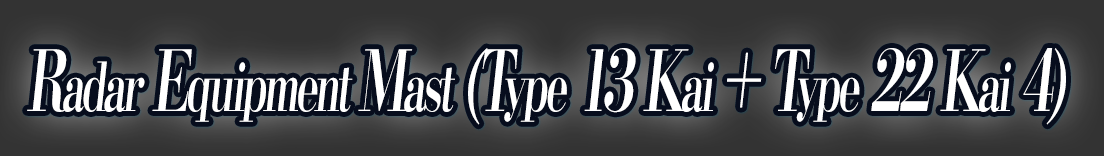
<style>
.page{position:relative;width:1104px;height:156px}
.page>*{position:absolute;margin:0}
.t1{font:67.2px "KochoStd-Heavy";letter-spacing:-0.08em;color:#ffffff;font-style:italic;scale:0.62 1}
.t2{font:84px "KochoStd-Heavy";letter-spacing:-0.08em;color:#ffffff;font-style:italic;scale:0.62 1}
</style>
<div class="page">
<p class="t1" style="left:27px;top:48px;width:1039px;height:77px"><span class="t2">R</span>adar<span class="t2"> E</span>quipment <span class="t2">M</span>ast<span class="t2"> (T</span>ype<span class="t2"> 13 K</span>ai <span class="t2">+ T</span>ype<span class="t2"> 22 K</span>ai<span class="t2"> 4)</span></p>
</div>
